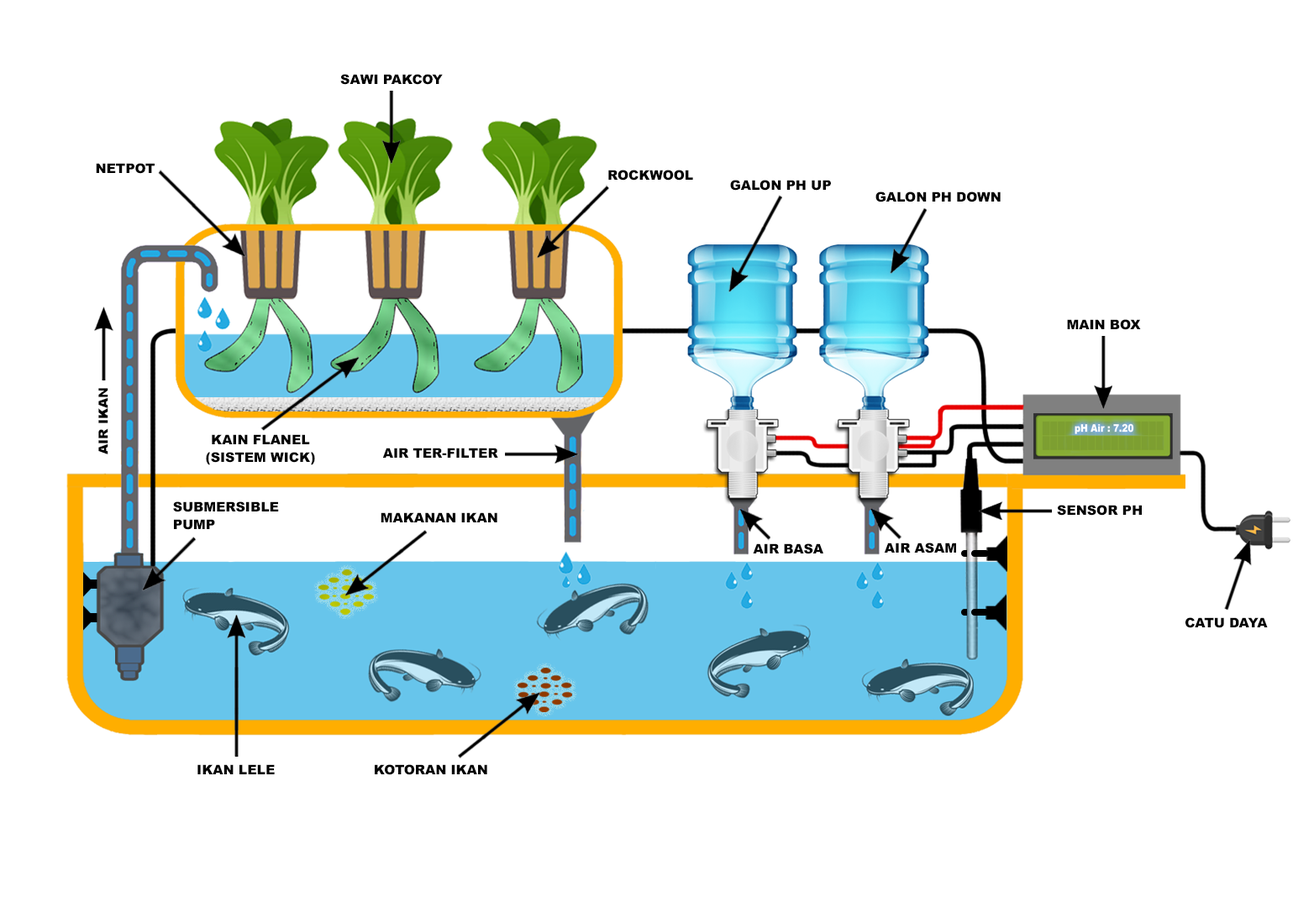
<style>
.page{position:relative;width:1314px;height:907px;background:#ffffff}
.page>*{position:absolute;margin:0}
.t1{font:13.2px "Arial-Black";color:#020202}
.t2{font:13px "Arial-Black";color:#020202}
.t3{font:13.2px/17.8px "Arial-Black";color:#020202}
</style>
<div class="page">
<p class="t1" style="left:340px;top:74px;width:103px;height:11px">SAWI PAKCOY</p>
<p class="t1" style="left:96px;top:163px;width:59px;height:11px">NETPOT</p>
<p class="t1" style="left:608px;top:170px;width:85px;height:11px">ROCKWOOL</p>
<p class="t1" style="left:730px;top:180px;width:101px;height:11px">GALON PH UP</p>
<p class="t1" style="left:875px;top:192px;width:126px;height:10px">GALON PH DOWN</p>
<p class="t1" style="left:1067px;top:319px;width:74px;height:11px">MAIN BOX</p>
<p class="t2" style="left:98px;top:388px;width:10px;height:67px;rotate:-90deg">AIR IKAN</p>
<p class="t3" style="left:206px;top:434px;width:109px;height:31px;text-align:center">KAIN FLANEL<br>(SISTEM WICK)</p>
<p class="t1" style="left:382px;top:448px;width:116px;height:10px">AIR TER-FILTER</p>
<p class="t3" style="left:173px;top:502px;width:106px;height:28px">SUBMERSIBLE <br>PUMP</p>
<p class="t1" style="left:1057px;top:505px;width:85px;height:11px">SENSOR PH</p>
<p class="t1" style="left:381px;top:513px;width:116px;height:10px">MAKANAN IKAN</p>
<p class="t1" style="left:753px;top:544px;width:70px;height:11px">AIR BASA</p>
<p class="t1" style="left:884px;top:543px;width:72px;height:11px">AIR ASAM</p>
<p class="t1" style="left:1186px;top:618px;width:82px;height:10px">CATU DAYA</p>
<p class="t1" style="left:197px;top:765px;width:78px;height:10px">IKAN LELE</p>
<p class="t1" style="left:375px;top:765px;width:112px;height:11px">KOTORAN IKAN</p>
</div>
